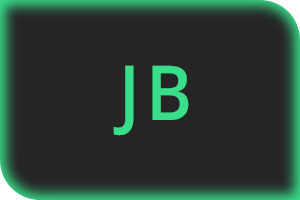
<style>
.page{position:relative;width:300px;height:200px;background:#252525}
.page>*{position:absolute;margin:0}
.t1{font:76px "OpenSans-Semibold";letter-spacing:0.075em;color:#38de8a;scale:0.92 1}
</style>
<div class="page">
<p class="t1" style="left:113px;top:65px;width:76px;height:71px">JB</p>
</div>
